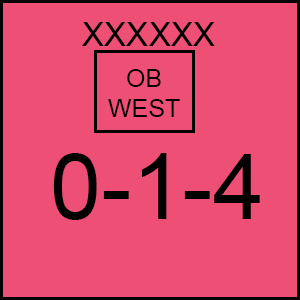
<style>
.page{position:relative;width:300px;height:300px;background:#ee4f74}
.page>*{position:absolute;margin:0}
.t1{font:33.3px "ArialMT";color:#000000}
.t2{font:25px "ArialMT";color:#000000}
.t3{font:91.7px "ArialMT";color:#000000}
</style>
<div class="page">
<p class="t1" style="left:82px;top:22px;width:133px;height:24px">XXXXXX</p>
<p class="t2" style="left:108px;top:69px;width:72px;height:48px;text-align:center">OB<br>WEST</p>
<p class="t3" style="left:53px;top:153px;width:207px;height:67px">0-1-4</p>
</div>
